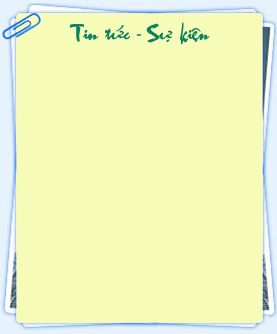
<style>
.page{position:relative;width:277px;height:334px;background:#f6fbb7}
.page>*{position:absolute;margin:0}
.t1{font:18px "VNI-Thufap1";color:#098060}
</style>
<div class="page">
<p class="t1" style="left:69px;top:22px;width:141px;height:23px">Tin töùc - Söï kieän</p>
</div>
